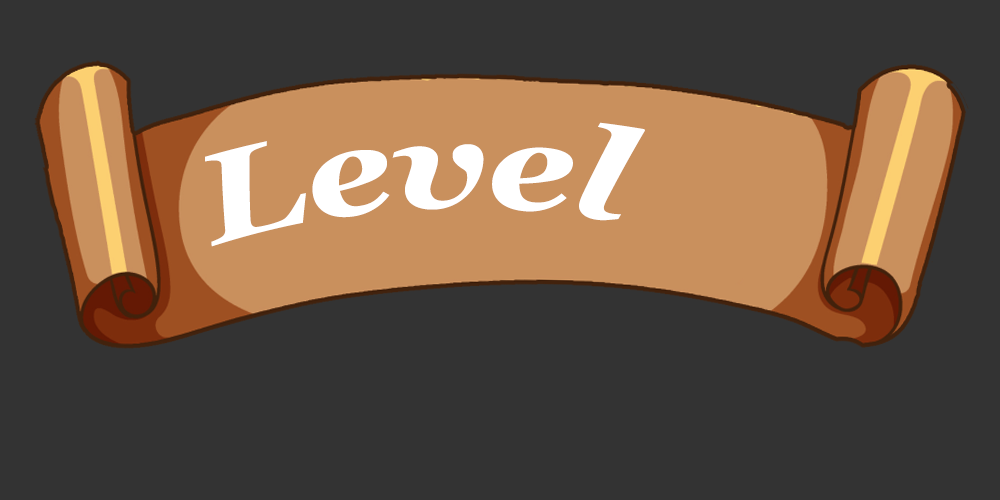
<style>
.page{position:relative;width:1000px;height:500px;background:#333333}
.page>*{position:absolute;margin:0}
.t1{font:125.2px "Georgia-BoldItalic";color:#ffffff;scale:1.11 1}
</style>
<div class="page">
<p class="t1" style="left:205px;top:122px;width:440px;height:125px;rotate:-3deg">Level</p>
</div>
